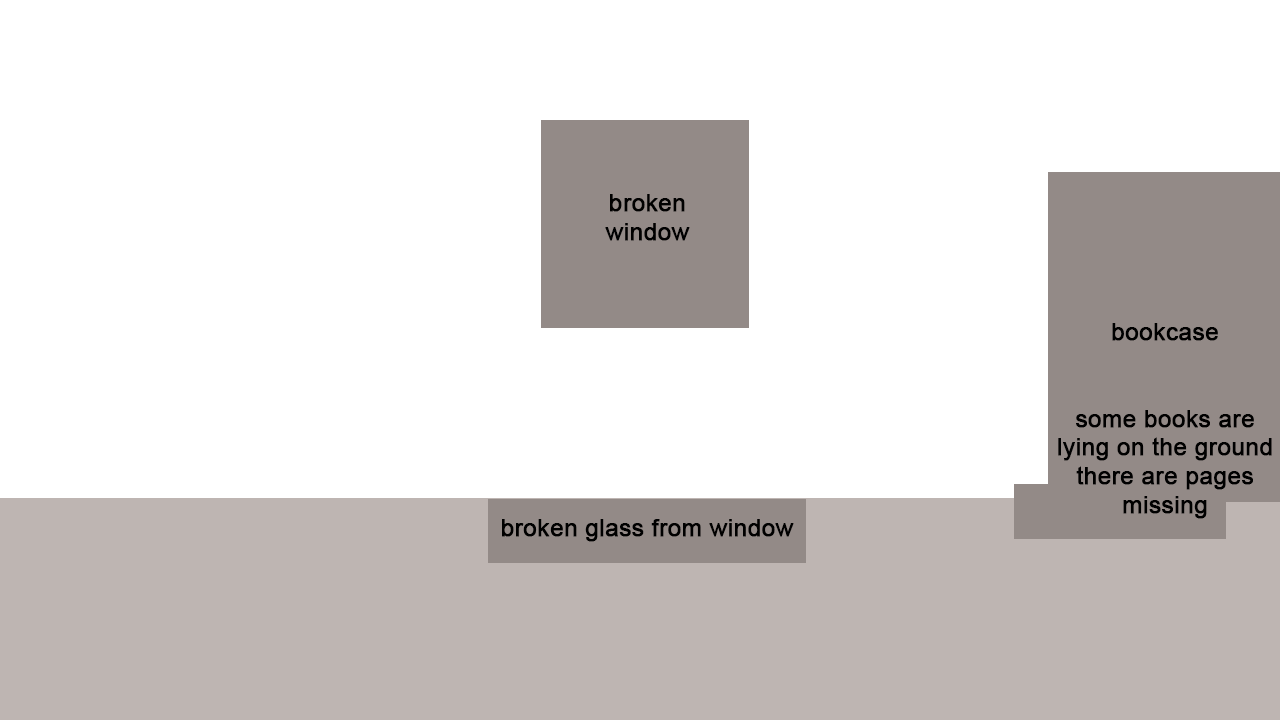
<style>
.page{position:relative;width:1280px;height:720px;background:#ffffff}
.page>*{position:absolute;margin:0}
.t1{font:24px "ArialMT";color:#000000;font-weight:bold}
</style>
<div class="page">
<p class="t1" style="left:605px;top:194px;width:85px;height:47px;text-align:center">broken<br>window</p>
<p class="t1" style="left:1058px;top:323px;width:214px;height:196px;text-align:center">bookcase<br><br><br>some books are<br>lying on the ground<br>there are pages<br>missing</p>
<p class="t1" style="left:502px;top:519px;width:292px;height:23px">broken glass from window</p>
</div>
